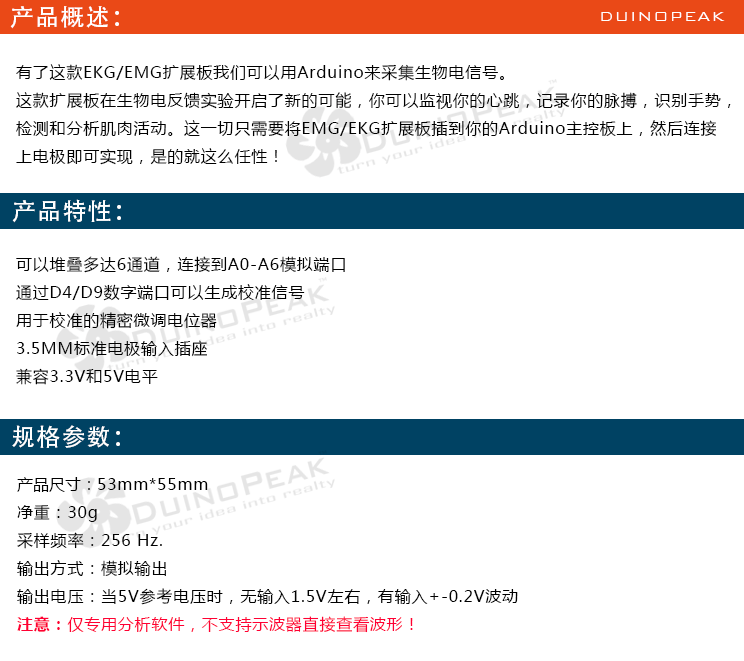
<style>
.page{position:relative;width:744px;height:661px;background:#ffffff}
.page>*{position:absolute;margin:0}
.t1{font:24px "AdobeHeitiStd-Regular";letter-spacing:0.05em;color:#ffffff}
.t2{font:18px "BankGothicBT-Light";letter-spacing:0.05em;color:#ffffff}
.t3{font:16px "MicrosoftYaHei";letter-spacing:0.05em;color:#000000}
.t4{font:16px "MicrosoftYaHei";color:#000000}
.t5{font:16px "MicrosoftYaHei-Bold";letter-spacing:0.05em;color:#ff0033}
.t6{font:16px "MicrosoftYaHei";letter-spacing:0.05em;color:#ff0033}
</style>
<div class="page">
<p class="t1" style="left:10px;top:6px;width:109px;height:23px">产品概述：</p>
<p class="t2" style="left:601px;top:12px;width:124px;height:9px">DUINOPEAK</p>
<p class="t3" style="left:16px;top:64px;width:715px;height:101px">有了这款EKG/EMG扩展板我们可以用Arduino来采集生物电信号。<br>这款扩展板在生物电反馈实验开启了新的可能，你可以监视你的心跳，记录你的脉搏，识别手势，<br>检测和分析肌肉活动。这一切只需要将EMG/EKG扩展板插到你的Arduino主控板上，然后连接<br>上电极即可实现，是的就这么任性！</p>
<p class="t1" style="left:12px;top:199px;width:109px;height:24px">产品特性：</p>
<p class="t3" style="left:16px;top:256px;width:329px;height:129px">可以堆叠多达6通道，连接到A0-A6模拟端口<br>通过D4/D9数字端口可以生成校准信号<br>用于校准的精密微调电位器<br>3.5MM标准电极输入插座<br>兼容3.3V和5V电平</p>
<p class="t1" style="left:12px;top:425px;width:108px;height:23px">规格参数：</p>
<p class="t3" style="left:17px;top:477px;width:501px;height:156px"><span class="t4">产品尺寸：</span>53mm*55mm<br>净重：30g<br>采样频率：256 Hz.<br>输出方式：模拟输出<br>输出电压：当5V参考电压时，无输入1.5V左右，有输入+-0.2V波动<br><span class="t5">注意：</span><span class="t6">仅专用分析软件，不支持示波器直接查看波形！</span></p>
</div>
